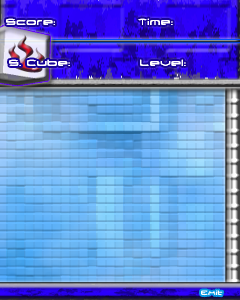
<style>
.page{position:relative;width:240px;height:300px}
.page>*{position:absolute;margin:0}
.t1{font:11px "ThundergodII";color:#ffffff}
.t2{font:8px "ThundergodII";color:#ffffff}
</style>
<div class="page">
<p class="t1" style="left:6px;top:18px;width:49px;height:7px">Score:</p>
<p class="t1" style="left:138px;top:18px;width:35px;height:7px">Time:</p>
<p class="t1" style="left:9px;top:59px;width:61px;height:7px">S. Cube:</p>
<p class="t1" style="left:140px;top:59px;width:46px;height:7px">Level:</p>
<p class="t2" style="left:201px;top:290px;width:22px;height:6px">Exit</p>
</div>
